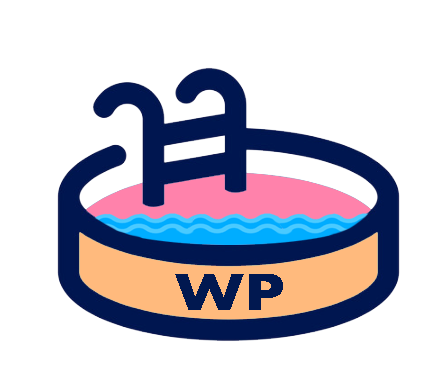
<style>
.page{position:relative;width:440px;height:390px;background:#ffffff}
.page>*{position:absolute;margin:0}
.t1{font:48px "Futura-Bold";color:#011850;scale:1.25 1}
</style>
<div class="page">
<p class="t1" style="left:175px;top:274px;width:108px;height:36px">WP</p>
</div>
